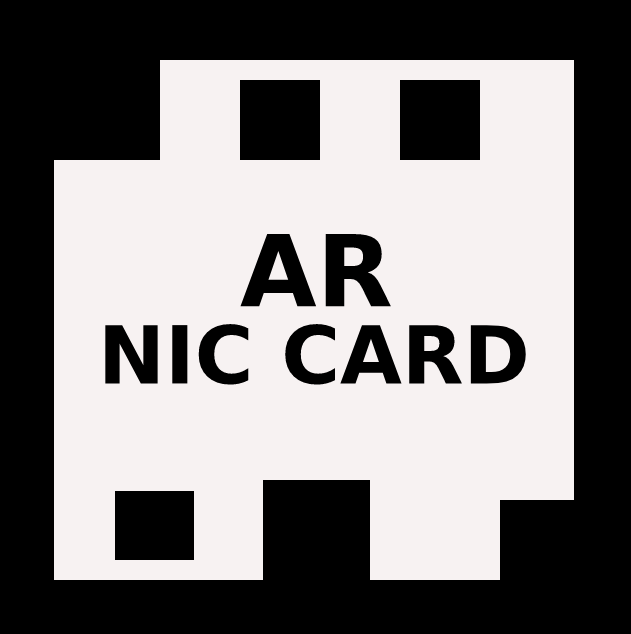
<style>
.page{position:relative;width:631px;height:634px;background:#f7f2f2}
.page>*{position:absolute;margin:0}
.t1{font:99px "DejaVuSans-Bold";color:#000000}
.t2{font:80px "DejaVuSans-Bold";color:#000000}
</style>
<div class="page">
<p class="t1" style="left:240px;top:234px;width:151px;height:73px">AR</p>
<p class="t2" style="left:105px;top:324px;width:421px;height:61px">NIC CARD</p>
</div>
